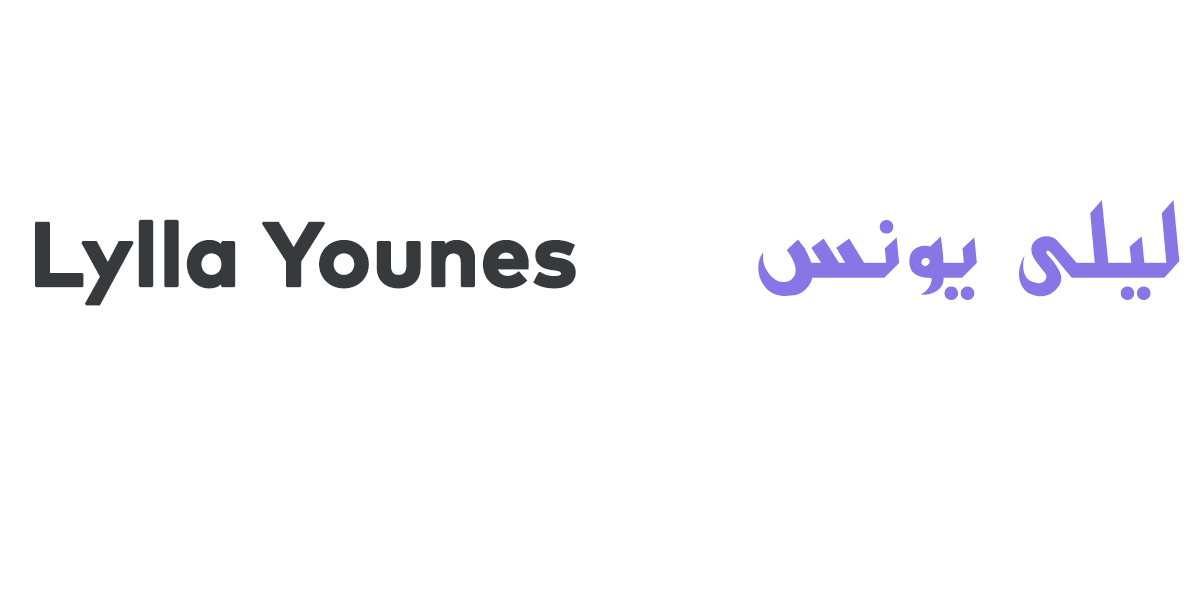
<style>
.page{position:relative;width:1200px;height:600px;background:#ffffff}
.page>*{position:absolute;margin:0}
.t1{font:100px "ae_Cortoba";color:#8875e6}
.t2{font:90px "MarkPro-Bold";color:#373a3c;font-weight:bold}
</style>
<div class="page">
<p class="t1" style="left:758px;top:200px;width:422px;height:100px">ليلی يونس</p>
<p class="t2" style="left:35px;top:219px;width:541px;height:87px">Lylla Younes</p>
</div>
